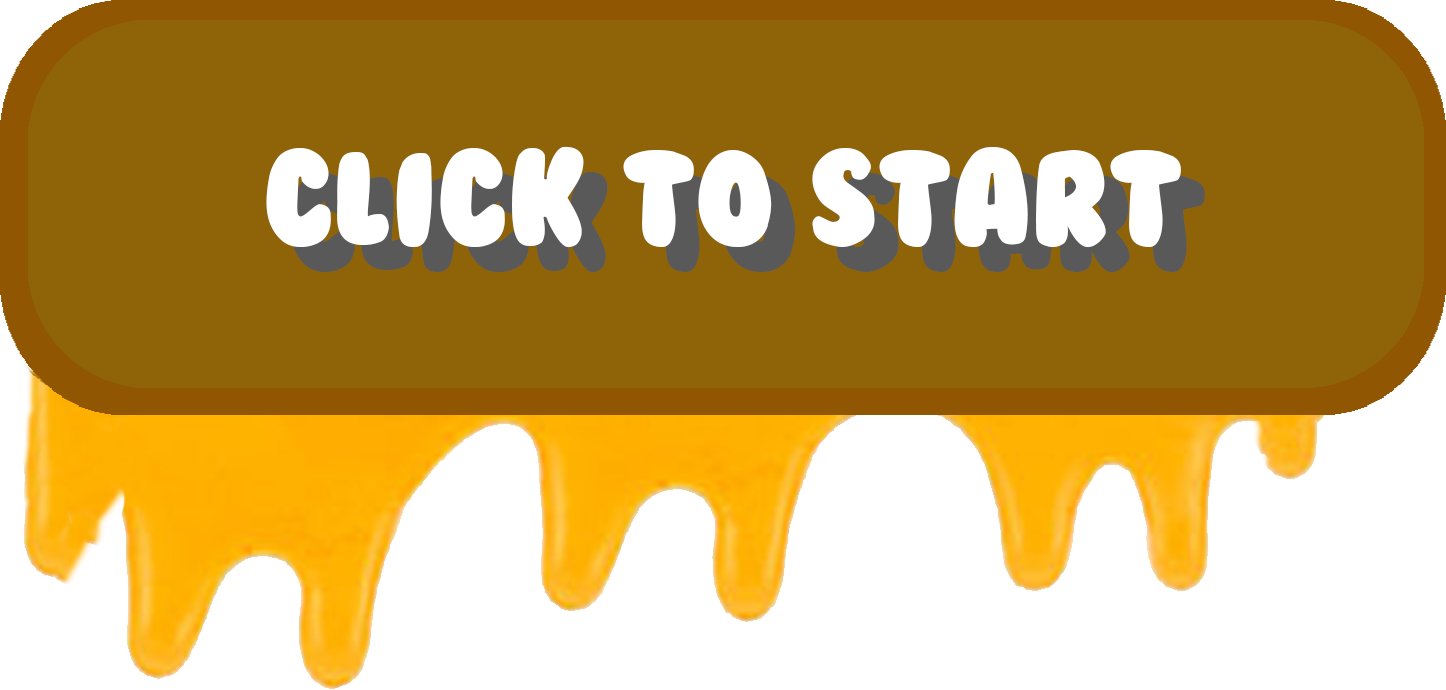
<style>
.page{position:relative;width:1446px;height:690px;background:#8f6409}
.page>*{position:absolute;margin:0}
.t1{font:125px "BubbleGum";color:#ffffff}
</style>
<div class="page">
<p class="t1" style="left:266px;top:146px;width:915px;height:102px">Click to start</p>
</div>
